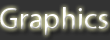
<style>
.page{position:relative;width:110px;height:40px;background:#333333}
.page>*{position:absolute;margin:0}
.t1{font:30px "MyriadPro-Regular";color:#ffffff}
</style>
<div class="page">
<p class="t1" style="left:0px;top:7px;width:108px;height:28px">Graphics</p>
</div>
